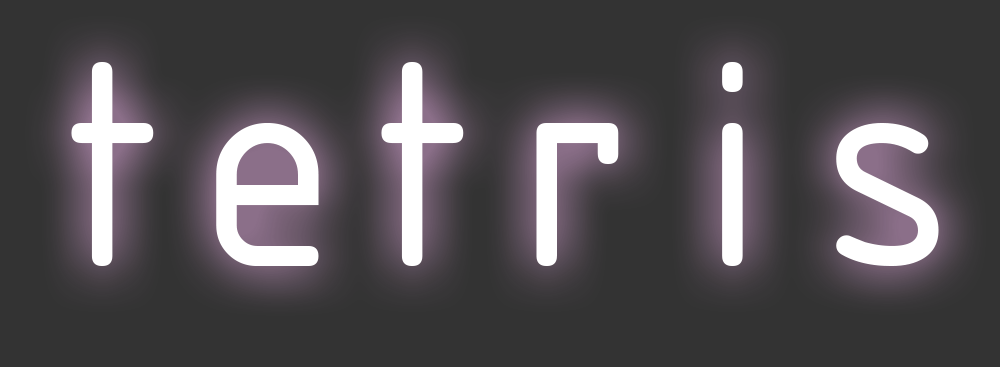
<style>
.page{position:relative;width:1000px;height:367px;background:#333333}
.page>*{position:absolute;margin:0}
.t1{font:317.2px "ISOCTEUR";letter-spacing:-0.22em;color:#ffffff}
</style>
<div class="page">
<p class="t1" style="left:71px;top:62px;width:868px;height:204px">tetris</p>
</div>
